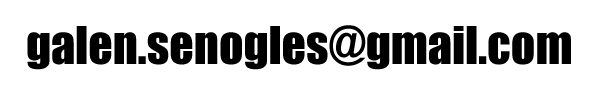
<style>
.page{position:relative;width:600px;height:100px;background:#ffffff}
.page>*{position:absolute;margin:0}
.t1{font:48px "Impact";color:#000000}
</style>
<div class="page">
<p class="t1" style="left:27px;top:25px;width:544px;height:45px">galen.senogles@gmail.com</p>
</div>
